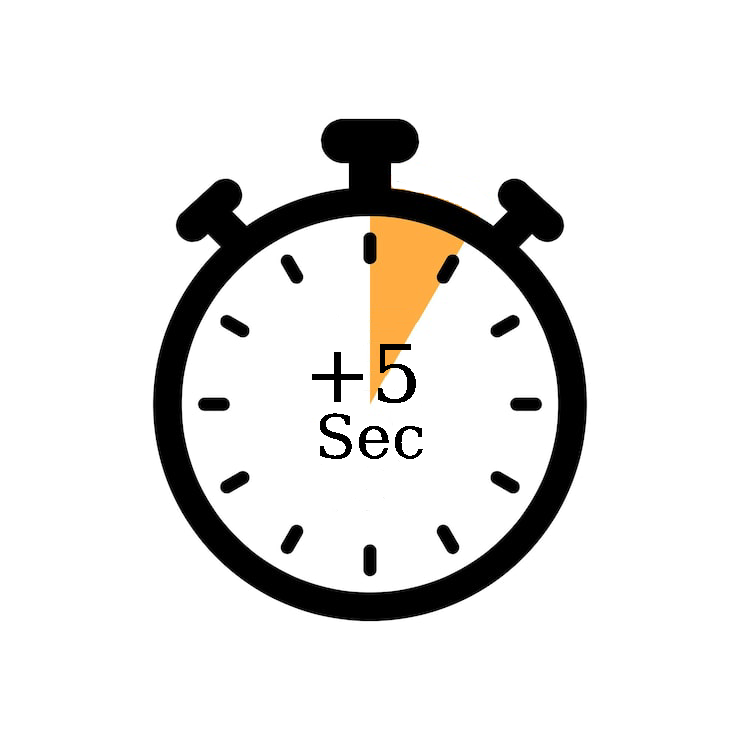
<style>
.page{position:relative;width:740px;height:740px;background:#ffffff}
.page>*{position:absolute;margin:0}
.t1{font:80px "DejaVuSerif";color:#000000}
.t2{font:60px "DejaVuSerif";color:#000000}
</style>
<div class="page">
<p class="t1" style="left:312px;top:343px;width:104px;height:61px">+5</p>
<p class="t2" style="left:320px;top:413px;width:103px;height:46px">Sec</p>
</div>
